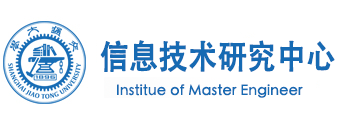
<style>
.page{position:relative;width:360px;height:124px;background:#ffffff}
.page>*{position:absolute;margin:0}
.t1{font:33px "STHeitiSC-Medium";color:#166ab3;font-weight:bold;scale:0.87 1}
.t2{font:14px "STHeitiSC-Light";color:#166ab3;font-weight:bold}
</style>
<div class="page">
<p class="t1" style="left:100px;top:40px;width:235px;height:32px">信息技术研究中心</p>
<p class="t2" style="left:117px;top:84px;width:186px;height:14px">Institue of Master Engineer</p>
</div>
